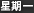
<style>
.page{position:relative;width:34px;height:13px}
.page>*{position:absolute;margin:0}
.t1{font:11.1px "AdobeHeitiStd-Regular";color:#ffffff}
</style>
<div class="page">
<p class="t1" style="left:0px;top:1px;width:33px;height:10px">星期一</p>
</div>
